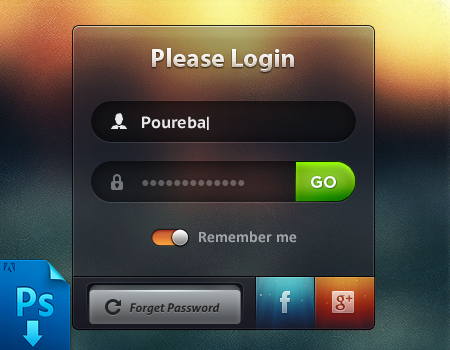
<style>
.page{position:relative;width:450px;height:350px}
.page>*{position:absolute;margin:0}
.t1{font:26px "MyriadPro-Bold"}
.t2{font:16px "PTSans-CaptionBold";color:#ffffff}
.t3{font:14px "Tahoma";color:#6b6161}
.t4{font:17px "GothamBold";letter-spacing:-0.02em;color:#ffffff}
.t5{font:16px "Calibri-Bold";color:#a0a3a5}
.t6{font:12px "Aller-BoldItalic";color:#242425}
</style>
<div class="page">
<p class="t1" style="left:152px;top:48px;width:142px;height:24px">Please Login</p>
<p class="t1" style="left:152px;top:48px;width:142px;height:24px">Please Login</p>
<p class="t2" style="left:142px;top:116px;width:67px;height:14px">Poureba|</p>
<p class="t3" style="left:142px;top:180px;width:103px;height:6px">●●●●●●●●●●●●●</p>
<p class="t4" style="left:311px;top:176px;width:25px;height:12px">GO</p>
<p class="t5" style="left:199px;top:231px;width:98px;height:12px">Remember me</p>
<p class="t6" style="left:130px;top:303px;width:90px;height:12px">Forget Password</p>
</div>
